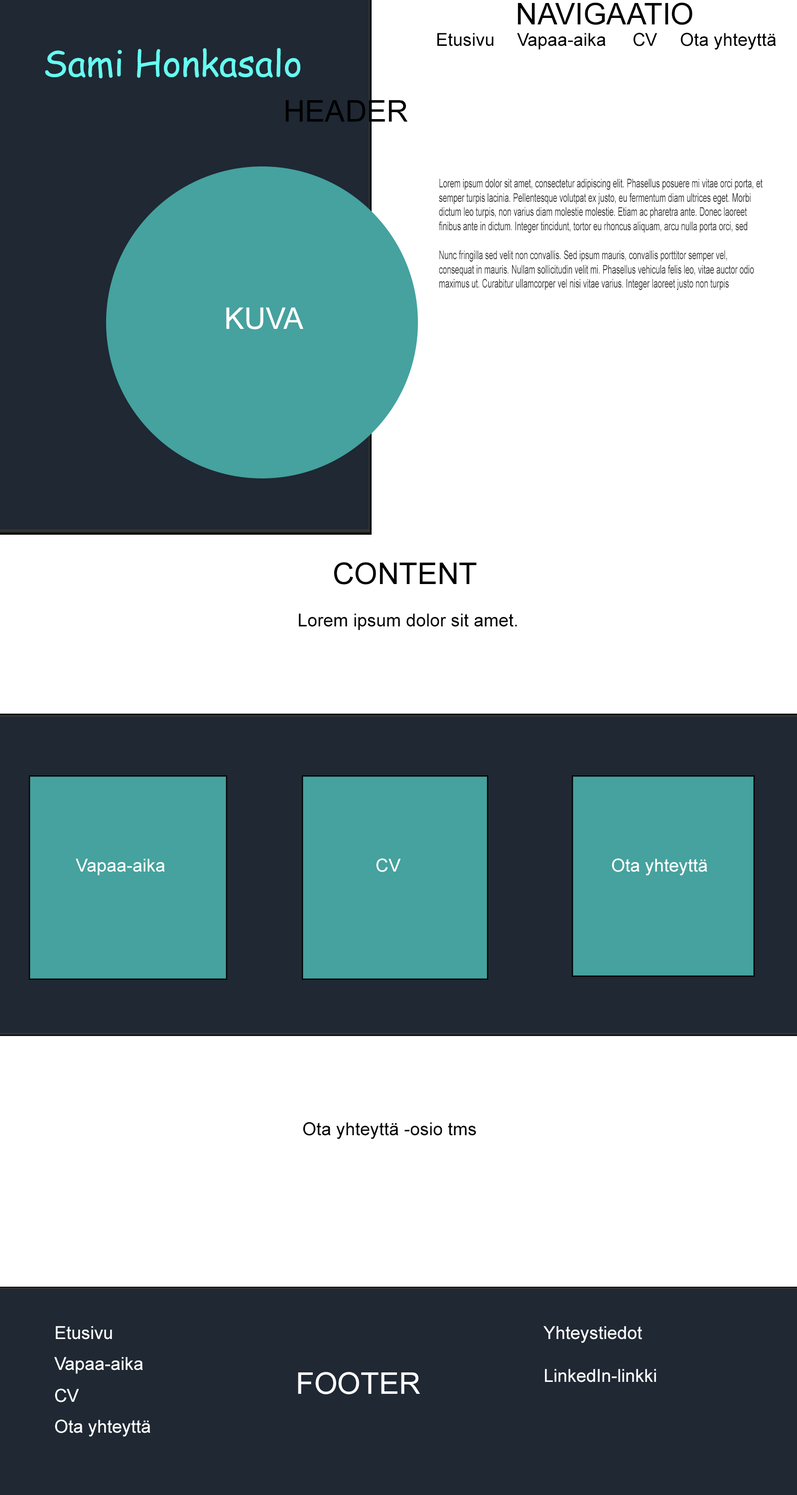
<style>
.page{position:relative;width:797px;height:1495px;background:#ffffff}
.page>*{position:absolute;margin:0}
.t1{font:29.9px "ArialMT";color:#000000}
.t2{font:17.9px "ArialMT";color:#000000}
.t3{font:17.9px "ArialMT";color:#010101}
.t4{font:35.9px "ComicSansMS";color:#66fcf1}
.t5{font:12px "ArialMT";color:#333333;scale:0.64 1}
.t6{font:29.9px "ArialMT";color:#ffffff}
.t7{font:17.9px "ArialMT";color:#ffffff}
</style>
<div class="page">
<p class="t1" style="left:518px;top:2px;width:175px;height:23px">NAVIGAATIO</p>
<p class="t2" style="left:438px;top:33px;width:56px;height:13px">Etusivu</p>
<p class="t2" style="left:517px;top:33px;width:89px;height:17px">Vapaa-aika</p>
<p class="t2" style="left:633px;top:32px;width:25px;height:14px">CV</p>
<p class="t3" style="left:681px;top:32px;width:96px;height:18px">Ota yhteyttä</p>
<p class="t4" style="left:45px;top:48px;width:256px;height:31px">Sami Honkasalo</p>
<p class="t1" style="left:286px;top:100px;width:122px;height:22px">HEADER</p>
<p class="t5" style="left:439px;top:178px;width:324px;height:112px">Lorem ipsum dolor sit amet, consectetur adipiscing elit. Phasellus posuere mi vitae orci porta, et semper turpis lacinia. Pellentesque volutpat ex justo, eu fermentum diam ultrices eget. Morbi dictum leo turpis, non varius diam molestie molestie. Etiam ac pharetra ante. Donec laoreet finibus ante in dictum. Integer tincidunt, tortor eu rhoncus aliquam, arcu nulla porta orci, sed <br><br>Nunc fringilla sed velit non convallis. Sed ipsum mauris, convallis porttitor semper vel, consequat in mauris. Nullam sollicitudin velit mi. Phasellus vehicula felis leo, vitae auctor odio maximus ut. Curabitur ullamcorper vel nisi vitae varius. Integer laoreet justo non turpis</p>
<p class="t6" style="left:226px;top:308px;width:78px;height:21px">KUVA</p>
<p class="t1" style="left:334px;top:562px;width:143px;height:23px">CONTENT</p>
<p class="t2" style="left:299px;top:614px;width:218px;height:17px">Lorem ipsum dolor sit amet.</p>
<p class="t7" style="left:376px;top:858px;width:25px;height:14px">CV</p>
<p class="t7" style="left:612px;top:858px;width:96px;height:18px">Ota yhteyttä</p>
<p class="t2" style="left:303px;top:1122px;width:173px;height:17px">Ota yhteyttä -osio tms</p>
<p class="t7" style="left:56px;top:1326px;width:56px;height:14px">Etusivu</p>
<p class="t7" style="left:544px;top:1326px;width:112px;height:57px">Yhteystiedot<br><br>LinkedIn-linkki</p>
<p class="t7" style="left:54px;top:1357px;width:89px;height:17px">Vapaa-aika</p>
<p class="t6" style="left:298px;top:1372px;width:122px;height:23px">FOOTER</p>
<p class="t7" style="left:55px;top:1389px;width:24px;height:14px">CV</p>
<p class="t7" style="left:55px;top:1420px;width:96px;height:17px">Ota yhteyttä</p>
</div>
